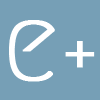
<style>
.page{position:relative;width:100px;height:100px;background:#769fb6}
.page>*{position:absolute;margin:0}
.t1{font:100px "Megrim";color:#ffffff;font-weight:bold}
</style>
<div class="page">
<p class="t1" style="left:9px;top:20px;width:86px;height:62px">e+</p>
</div>
